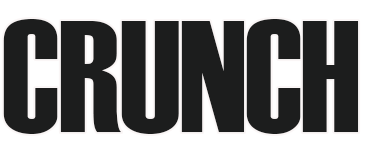
<style>
.page{position:relative;width:379px;height:150px;background:#1c1d1d}
.page>*{position:absolute;margin:0}
.t1{font:158.8px "Haettenschweiler";letter-spacing:-0.015em;color:#1c1d1d}
</style>
<div class="page">
<p class="t1" style="left:3px;top:19px;width:356px;height:115px">CRUNCH</p>
</div>
